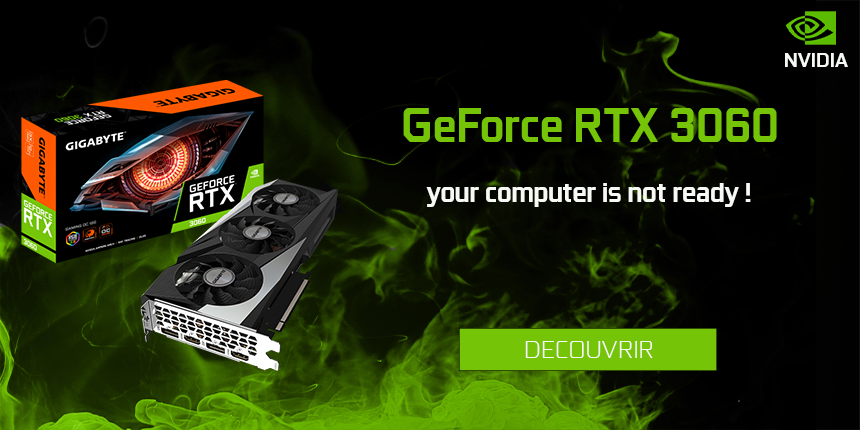
<style>
.page{position:relative;width:860px;height:430px;background:#000000}
.page>*{position:absolute;margin:0}
.t1{font:19.9px "GeForce-Bold-Alt";color:#f7f9f5}
.t2{font:49px "GeForce-Bold-Alt";color:#75c408;scale:0.94 1}
.t3{font:27.6px "GeForce-Bold-Alt";color:#f7f9f5}
.t4{font:25.1px "GeForce-Light-Alt";color:#f8fbf5}
</style>
<div class="page">
<p class="t1" style="left:785px;top:53px;width:63px;height:14px">NVIDIA</p>
<p class="t2" style="left:403px;top:108px;width:374px;height:34px">GeForce RTX 3060</p>
<p class="t3" style="left:426px;top:183px;width:325px;height:24px">your computer is not ready !</p>
<p class="t4" style="left:525px;top:341px;width:128px;height:17px">DECOUVRIR</p>
</div>
